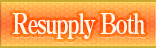
<style>
.page{position:relative;width:156px;height:48px}
.page>*{position:absolute;margin:0}
.t1{font:28px "RyuminPro-ExBold";letter-spacing:-0.08em;color:#fff8e7;scale:0.8 1}
</style>
<div class="page">
<p class="t1" style="left:12px;top:13px;width:133px;height:26px">Resupply Both</p>
</div>
